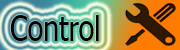
<style>
.page{position:relative;width:180px;height:50px}
.page>*{position:absolute;margin:0}
.t1{font:34.2px "Tahoma";color:#000000;scale:0.84 1}
</style>
<div class="page">
<p class="t1" style="left:10px;top:15px;width:89px;height:26px">Control</p>
</div>
